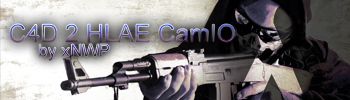
<style>
.page{position:relative;width:350px;height:100px}
.page>*{position:absolute;margin:0}
.t1{font:24.8px "ArialMT"}
</style>
<div class="page">
<p class="t1" style="left:9px;top:24px;width:226px;height:19px">C4D 2 HLAE CamIO</p>
</div>
